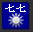
<style>
.page{position:relative;width:33px;height:32px;background:#000090}
.page>*{position:absolute;margin:0}
.t1{font:10.4px "SimSun";color:#ffffff}
</style>
<div class="page">
<p class="t1" style="left:5px;top:4px;width:21px;height:8px">七七</p>
</div>
